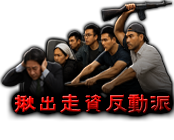
<style>
.page{position:relative;width:174px;height:140px;background:#ffffff}
.page>*{position:absolute;margin:0}
.t1{font:22.6px "FZZJ-MSHLFW"}
</style>
<div class="page">
<p class="t1" style="left:14px;top:94px;width:157px;height:20px">揪出走资反动派</p>
</div>
